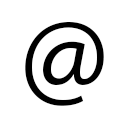
<style>
.page{position:relative;width:128px;height:128px;background:#ffffff}
.page>*{position:absolute;margin:0}
.t1{font:120px "MyriadPro-Regular";color:#000000}
</style>
<div class="page">
<p class="t1" style="left:25px;top:22px;width:79px;height:84px">@</p>
</div>
